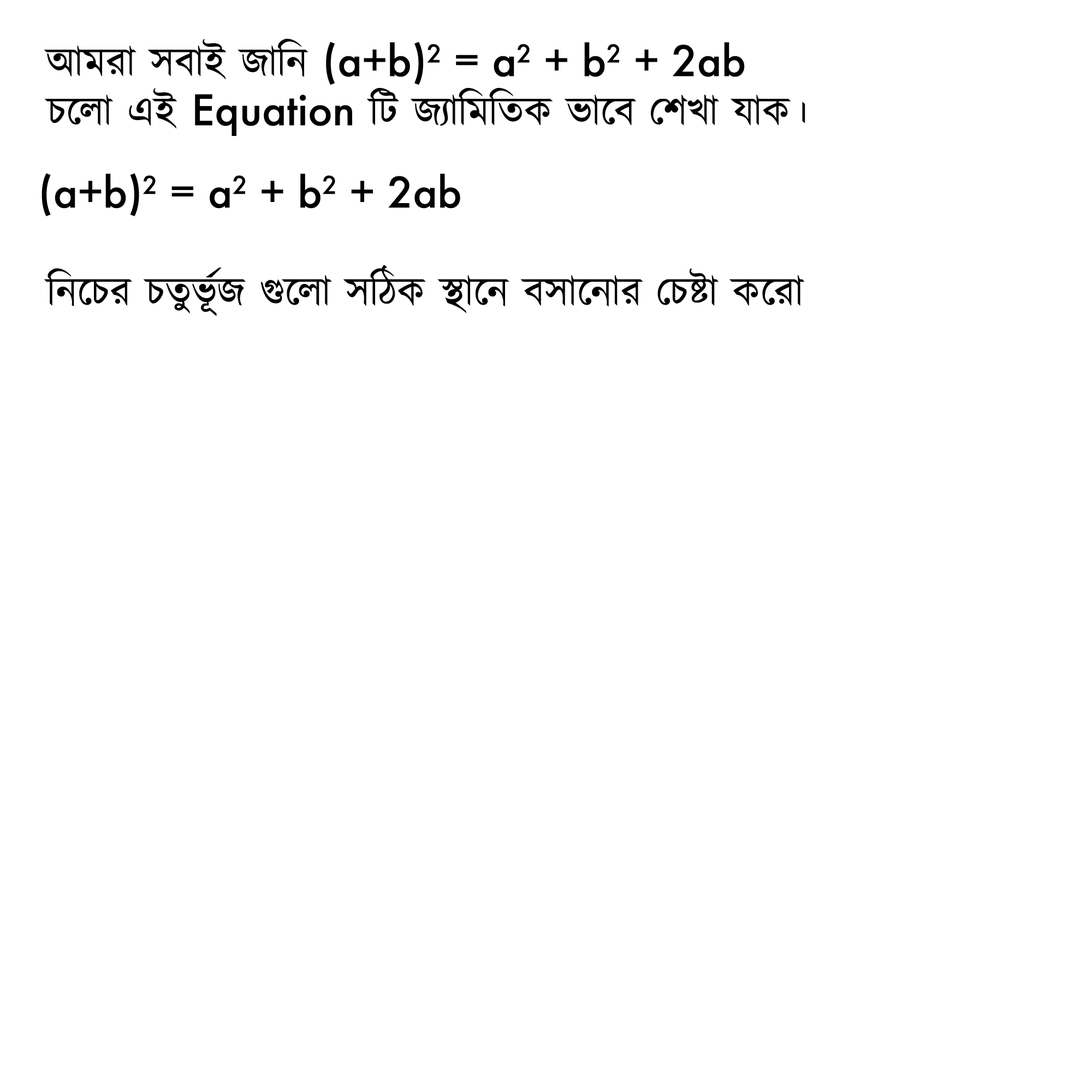
<style>
.page{position:relative;width:1092px;height:1092px;background:#ffffff}
.page>*{position:absolute;margin:0}
.t1{font:40.9px "Kalpurush";color:#000000}
.t2{font:40.9px "Futura-Medium";color:#000000}
</style>
<div class="page">
<p class="t1" style="left:44px;top:39px;width:761px;height:97px">আমরা সবাই জানি <span class="t2">(a+b)2 = a2 + b2 + 2ab<br></span>চলো এই <span class="t2">Equation</span> টি জ্যামিতিক ভাবে শেখা যাক।</p>
<p class="t2" style="left:41px;top:173px;width:419px;height:43px">(a+b)2 = a2 + b2 + 2ab</p>
<p class="t1" style="left:44px;top:265px;width:761px;height:51px">নিচের চতুর্ভূজ গুলো সঠিক স্থানে বসানোর চেষ্টা করো</p>
</div>
